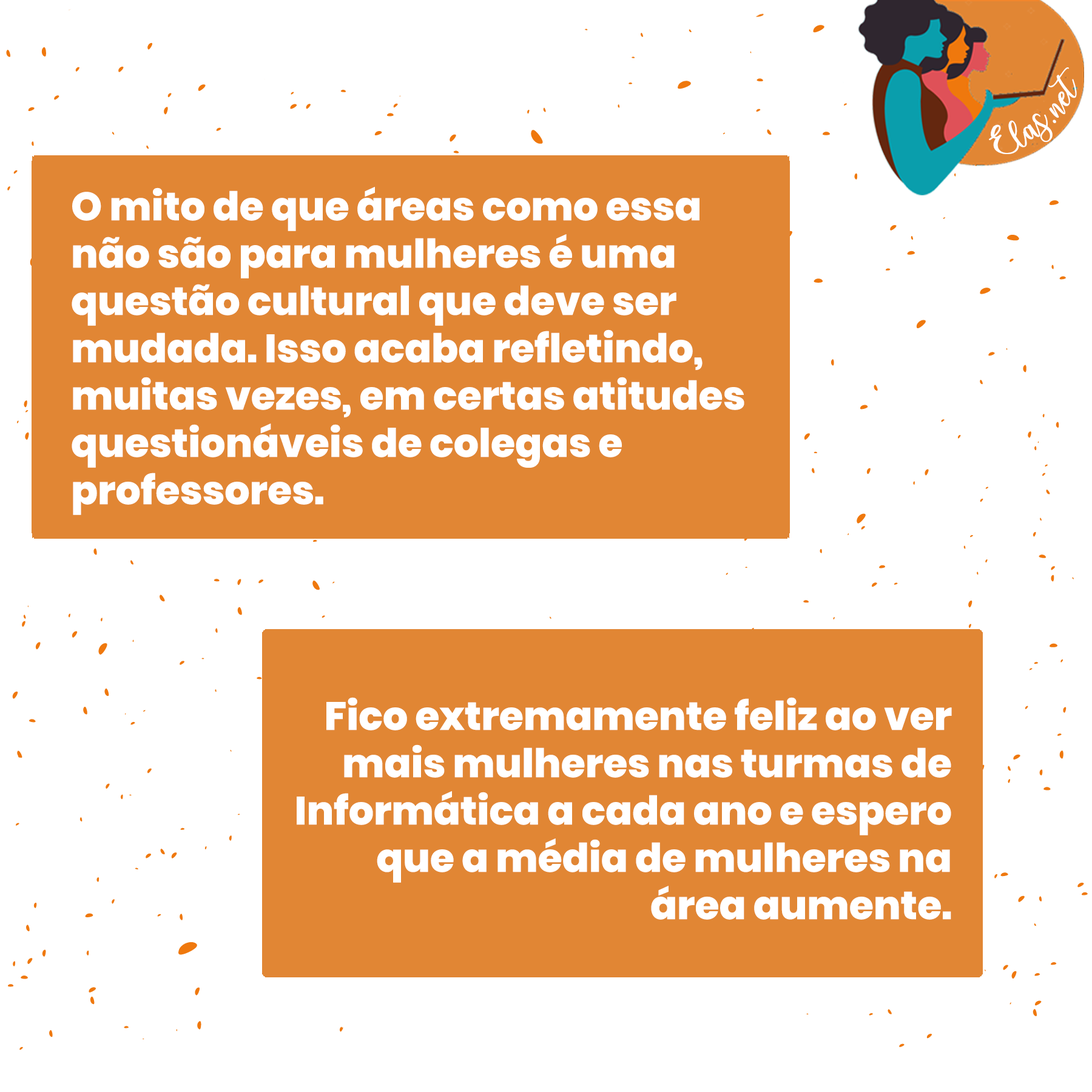
<style>
.page{position:relative;width:1092px;height:1092px;background:#ffffff}
.page>*{position:absolute;margin:0}
.t1{font:25px "charlinda-Regular";color:#ffffff;scale:1.18 1}
.t2{font:39.4px "Poppins-ExtraBold";color:#ffffff}
</style>
<div class="page">
<p class="t1" style="left:989px;top:67px;width:88px;height:87px;rotate:-42deg">Elas.net</p>
<p class="t2" style="left:72px;top:187px;width:672px;height:328px">O mito de que áreas como essa não são para mulheres é uma questão cultural que deve ser mudada. Isso acaba refletindo, muitas vezes, em certas atitudes questionáveis de colegas e professores.</p>
<p class="t2" style="left:297px;top:697px;width:655px;height:223px;text-align:right">Fico extremamente feliz ao ver mais mulheres nas turmas de Informática a cada ano e espero que a média de mulheres na área aumente.</p>
</div>
